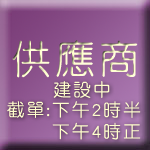
<style>
.page{position:relative;width:150px;height:150px}
.page>*{position:absolute;margin:0}
.t1{font:40px "DFYuan-Lt-HKP-BF";letter-spacing:0.1em}
.t2{font:18px "DFYuan-Lt-HKP-BF";letter-spacing:0.1em;color:#ffffcc}
</style>
<div class="page">
<p class="t1" style="left:12px;top:40px;width:126px;height:38px">供應商</p>
<p class="t2" style="left:53px;top:81px;width:57px;height:17px">建設中</p>
<p class="t2" style="left:7px;top:101px;width:134px;height:39px;text-align:right">截單:下午2時半<br>　　 下午4時正</p>
</div>
